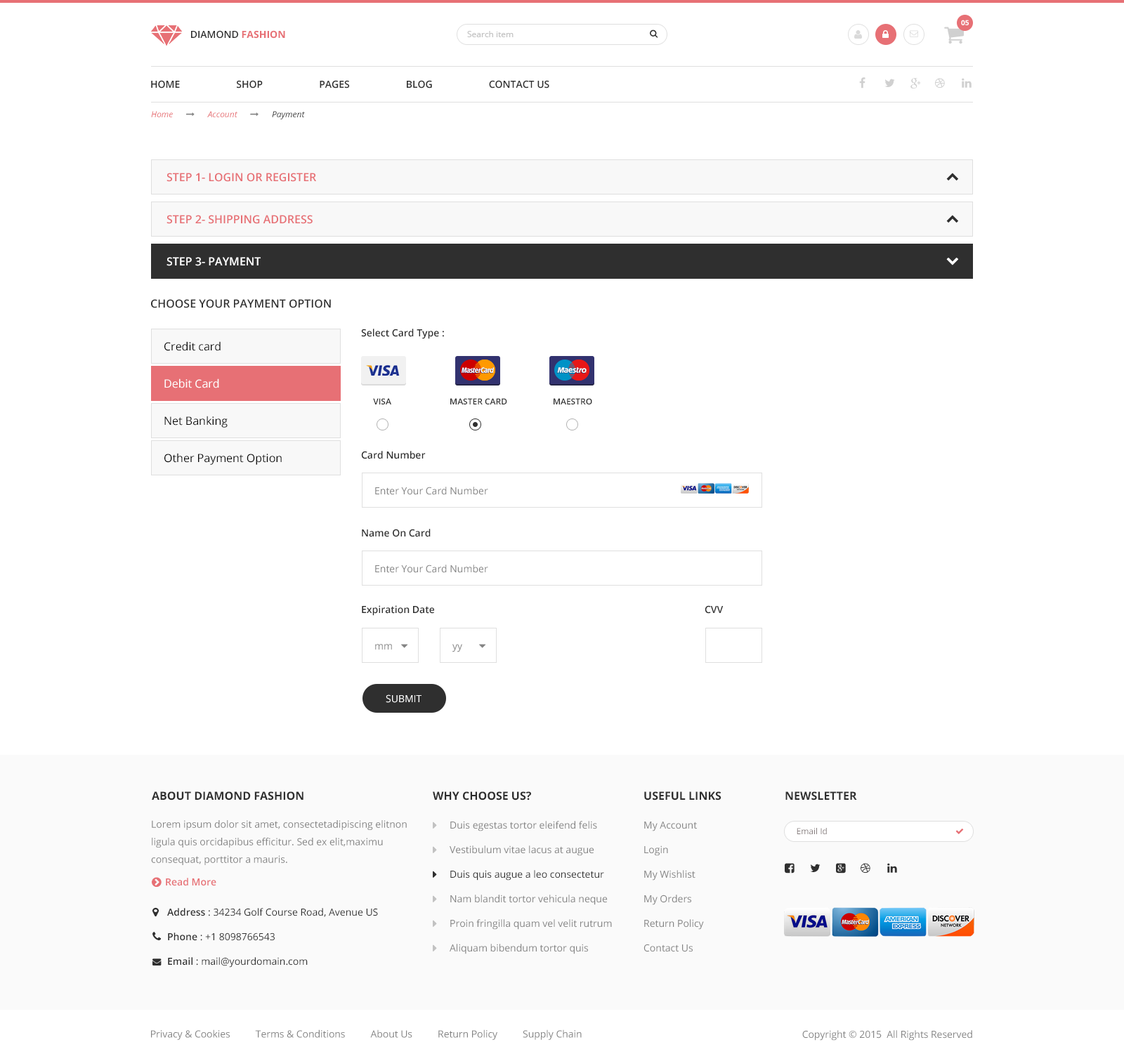
<style>
.page{position:relative;width:1124px;height:1061px;background:#ffffff}
.page>*{position:absolute;margin:0}
.t1{font:7px "OpenSans-Bold";color:#ffffff}
.t2{font:9.8px "OpenSans-Semibold";color:#2f2f2f;text-transform:uppercase}
.t3{font:9.8px "OpenSans-Bold";color:#e77075;text-transform:uppercase}
.t4{font:8.4px "OpenSans";color:#c2c2c2}
.t5{font:11.2px "OpenSans-Semibold";color:#e77075;text-transform:uppercase}
.t6{font:11.2px "OpenSans-Semibold";color:#ffffff;text-transform:uppercase}
.t7{font:11.2px "OpenSans-Semibold";color:#2f2f2f;text-transform:uppercase}
.t8{font:9.8px "OpenSans-Semibold";color:#2f2f2f}
.t9{font:11.2px "OpenSans";color:#0a0a0a}
.t10{font:11.2px "OpenSans";color:#ffffff}
.t11{font:8.4px "OpenSans-Semibold";color:#2f2f2f}
.t12{font:9.8px "OpenSans";color:#848484}
.t13{font:9.8px "OpenSans";color:#ffffff;text-transform:uppercase}
.t14{font:11.2px "OpenSans-Bold";color:#2f2f2f;text-transform:uppercase}
.t15{font:9.8px/17.6px "OpenSans";color:#848484}
.t16{font:9.8px/24.6px "OpenSans";color:#848484}
.t17{font:9.8px/24.6px "OpenSans";color:#2f2f2f}
.t18{font:8.4px "OpenSans";color:#887f80}
.t19{font:9.8px "OpenSans-Semibold";color:#e77075}
.t20{font:9.8px/24.6px "OpenSans-Semibold";color:#2f2f2f}
</style>
<div class="page">
<p class="t1" style="left:961px;top:20px;width:7px;height:5px">05</p>
<p class="t2" style="left:191px;top:30px;width:94px;height:9px">Diamond <span class="t3">fashion</span></p>
<p class="t4" style="left:467px;top:31px;width:46px;height:6px">Search item</p>
<p class="t2" style="left:151px;top:80px;width:398px;height:8px">Home                      Shop                      pages                      blog                      contact us</p>
<p class="t5" style="left:166px;top:173px;width:150px;height:9px">Step 1- Login or register</p>
<p class="t5" style="left:166px;top:215px;width:147px;height:9px">Step 2- Shipping address</p>
<p class="t6" style="left:166px;top:257px;width:95px;height:9px">Step 3- payment</p>
<p class="t7" style="left:151px;top:299px;width:180px;height:9px">Choose your payment option</p>
<p class="t8" style="left:361px;top:329px;width:83px;height:10px">Select Card Type :</p>
<p class="t9" style="left:164px;top:341px;width:57px;height:10px">Credit card</p>
<p class="t10" style="left:164px;top:379px;width:55px;height:9px">Debit Card</p>
<p class="t11" style="left:373px;top:398px;width:18px;height:7px">VISA</p>
<p class="t11" style="left:450px;top:398px;width:57px;height:7px">MASTER CARD</p>
<p class="t11" style="left:553px;top:398px;width:39px;height:7px">MAESTRO</p>
<p class="t9" style="left:164px;top:416px;width:64px;height:12px">Net Banking</p>
<p class="t9" style="left:164px;top:453px;width:118px;height:12px">Other Payment Option</p>
<p class="t8" style="left:361px;top:451px;width:65px;height:8px">Card Number</p>
<p class="t12" style="left:375px;top:487px;width:113px;height:8px">Enter Your Card Number</p>
<p class="t8" style="left:362px;top:529px;width:69px;height:8px">Name On Card</p>
<p class="t12" style="left:375px;top:565px;width:113px;height:8px">Enter Your Card Number</p>
<p class="t8" style="left:362px;top:605px;width:72px;height:11px">Expiration Date</p>
<p class="t8" style="left:704px;top:605px;width:19px;height:9px">CVV</p>
<p class="t12" style="left:375px;top:644px;width:17px;height:6px">mm</p>
<p class="t12" style="left:452px;top:644px;width:10px;height:8px">yy</p>
<p class="t13" style="left:386px;top:695px;width:35px;height:8px">submit</p>
<p class="t14" style="left:152px;top:791px;width:151px;height:10px">About diamond Fashion</p>
<p class="t14" style="left:433px;top:791px;width:98px;height:10px">why choose us?</p>
<p class="t14" style="left:644px;top:791px;width:77px;height:10px">useful links</p>
<p class="t14" style="left:785px;top:791px;width:72px;height:10px">newsletter</p>
<p class="t15" style="left:151px;top:820px;width:256px;height:45px">Lorem ipsum dolor sit amet, consectetadipiscing elitnon ligula quis orcidapibus efficitur. Sed ex elit,maximu<br>consequat, porttitor a mauris.</p>
<p class="t16" style="left:449px;top:821px;width:163px;height:133px">Duis egestas tortor eleifend felis <br>Vestibulum vitae lacus at augue <br><span class="t17">Duis quis augue a leo consectetur <br></span>Nam blandit tortor vehicula neque<br>Proin fringilla quam vel velit rutrum<br>Aliquam bibendum tortor quis</p>
<p class="t16" style="left:643px;top:822px;width:61px;height:130px">My Account<br>Login<br>My Wishlist<br>My Orders<br>Return Policy<br>Contact Us</p>
<p class="t18" style="left:796px;top:828px;width:31px;height:6px">Email Id</p>
<p class="t19" style="left:166px;top:878px;width:50px;height:8px">Read More</p>
<p class="t17" style="left:167px;top:908px;width:211px;height:60px"><span class="t20">Address</span> : 34234 Golf Course Road, Avenue US<br><span class="t20">Phone</span> : +1 8098766543<br><span class="t20">Email</span> : mail@yourdomain.com</p>
<p class="t12" style="left:151px;top:1030px;width:431px;height:10px">Privacy &amp; Cookies          Terms &amp; Conditions          About Us          Return Policy          Supply Chain</p>
<p class="t12" style="left:802px;top:1030px;width:170px;height:11px">Copyright © 2015  All Rights Reserved</p>
</div>
